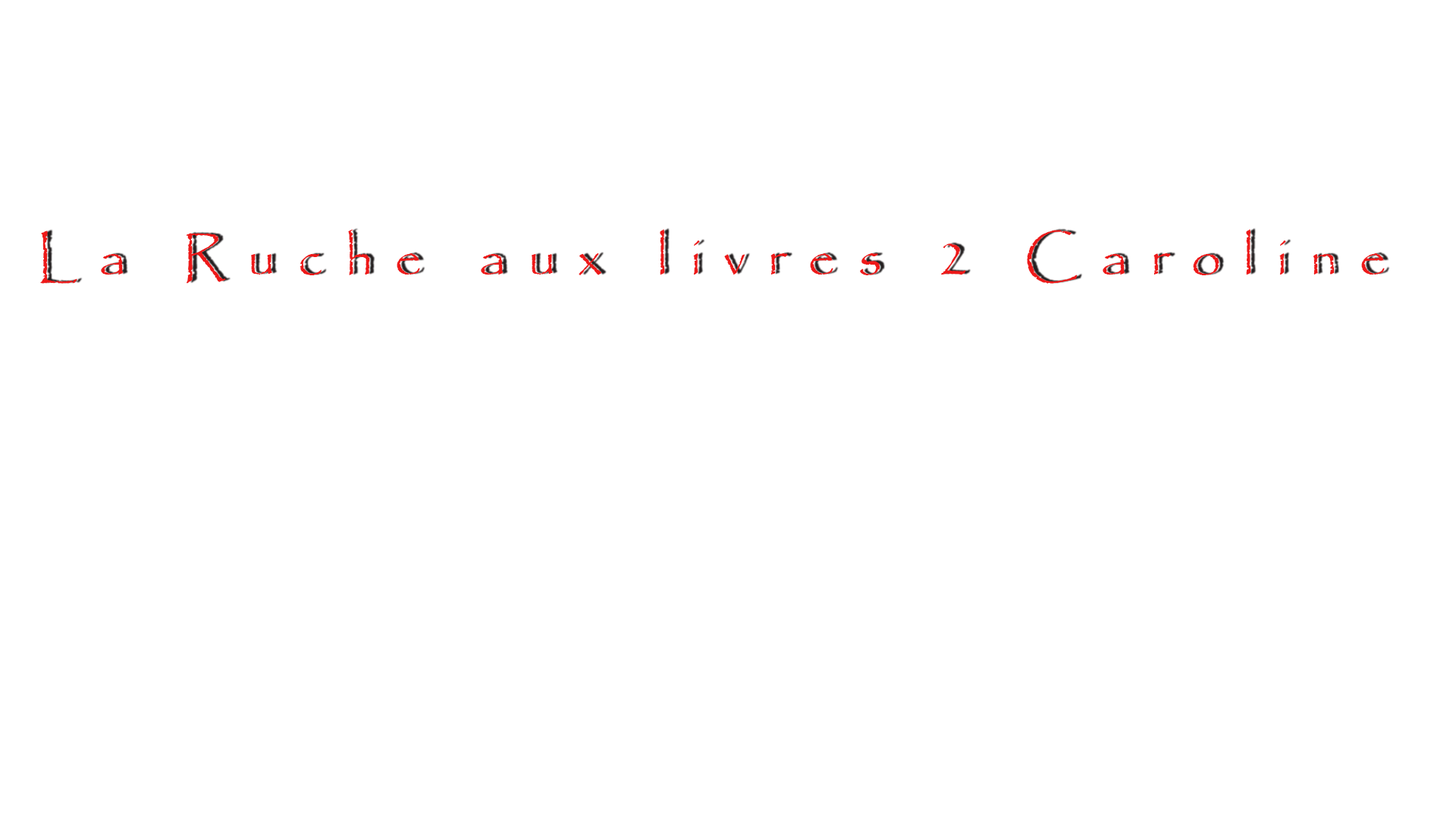
<style>
.page{position:relative;width:1456px;height:819px;background:#ffffff}
.page>*{position:absolute;margin:0}
.t1{font:54.6px "Papyrus-Regular";letter-spacing:0.4em;color:#ee1919}
</style>
<div class="page">
<p class="t1" style="left:40px;top:229px;width:1345px;height:55px">La Ruche aux livres 2 Caroline</p>
</div>
